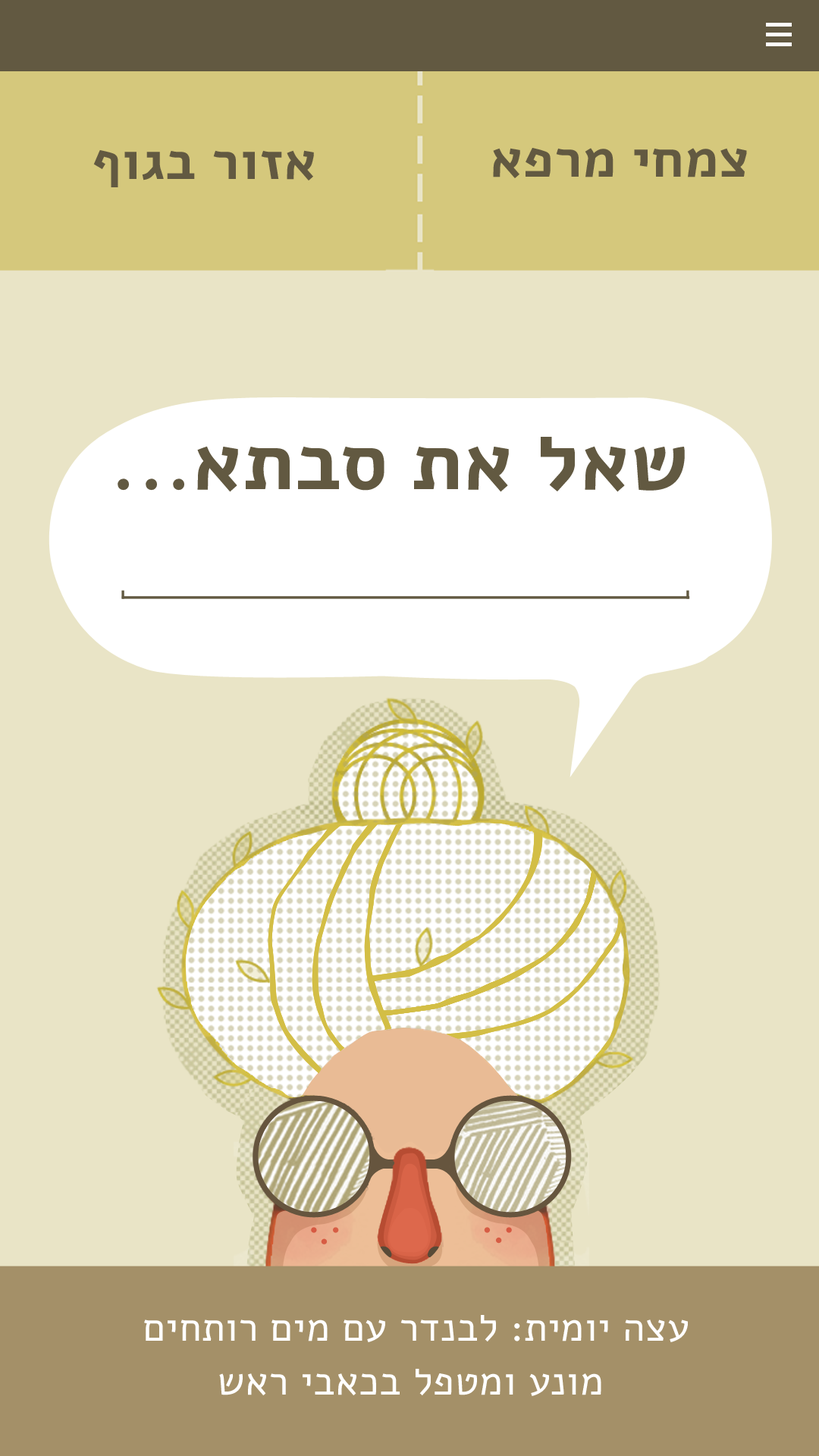
<style>
.page{position:relative;width:819px;height:1456px;background:#e9e4c6}
.page>*{position:absolute;margin:0}
.t1{font:53.4px "Alef-Bold";letter-spacing:0.01em;color:#625941}
.t2{font:80.1px "Alef-Bold";letter-spacing:0.01em;color:#625941}
.t3{font:40px/53.9px "Alef-Regular";letter-spacing:0.01em;color:#ffffff}
</style>
<div class="page">
<p class="t1" style="left:493px;top:148px;width:254px;height:30px">אפרמ יחמצ</p>
<p class="t1" style="left:93px;top:150px;width:221px;height:37px">ףוגב רוזא</p>
<p class="t2" style="left:118px;top:437px;width:567px;height:55px">...אתבס תא לאש</p>
<p class="t3" style="left:144px;top:1315px;width:544px;height:81px;text-align:center">םיחתור םימ םע רדנבל :תימוי הצע<br>שאר יבאכב לפטמו ענומ</p>
</div>
